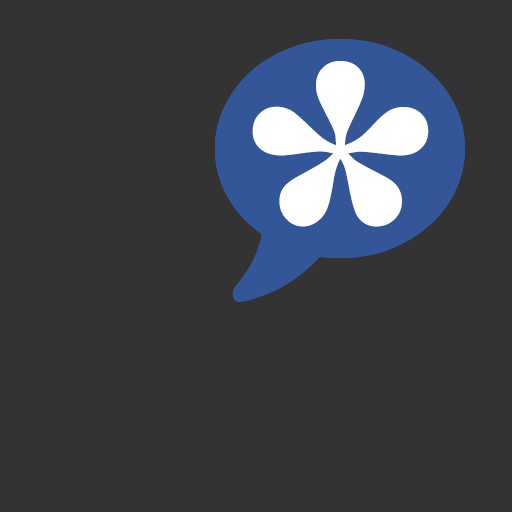
<style>
.page{position:relative;width:512px;height:512px;background:#333333}
.page>*{position:absolute;margin:0}
.t1{font:371.7px "CenturySchoolbook-Bold";letter-spacing:-0.025em;color:#ffffff}
</style>
<div class="page">
<p class="t1" style="left:252px;top:61px;width:177px;height:166px">*</p>
</div>
